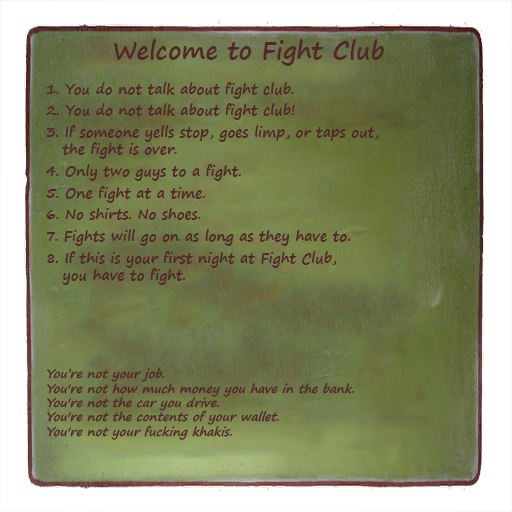
<style>
.page{position:relative;width:512px;height:512px}
.page>*{position:absolute;margin:0}
.t1{font:24px "SegoePrint-Bold";color:#522829}
.t2{font:14px "SegoePrint-Bold";color:#522829}
.t3{font:12px "SegoePrint-Bold";color:#522829;font-style:italic}
</style>
<div class="page">
<p class="t1" style="left:114px;top:39px;width:270px;height:27px">Welcome to Fight Club</p>
<p class="t2" style="left:46px;top:82px;width:333px;height:358px">1. You do not talk about fight club.<br>2. You do not talk about fight club!<br>3. If someone yells stop, goes limp, or taps out,<br>   the fight is over.<br>4. Only two guys to a fight.<br>5. One fight at a time.<br>6. No shirts. No shoes.<br>7. Fights will go on as long as they have to.<br>8. If this is your first night at Fight Club,<br>   you have to fight.<br><br><br><br><br><br><span class="t3">You’re not your job.<br>You're not how much money you have in the bank.<br>You're not the car you drive.<br>You're not the contents of your wallet.<br>You're not your fucking khakis.</span></p>
</div>
